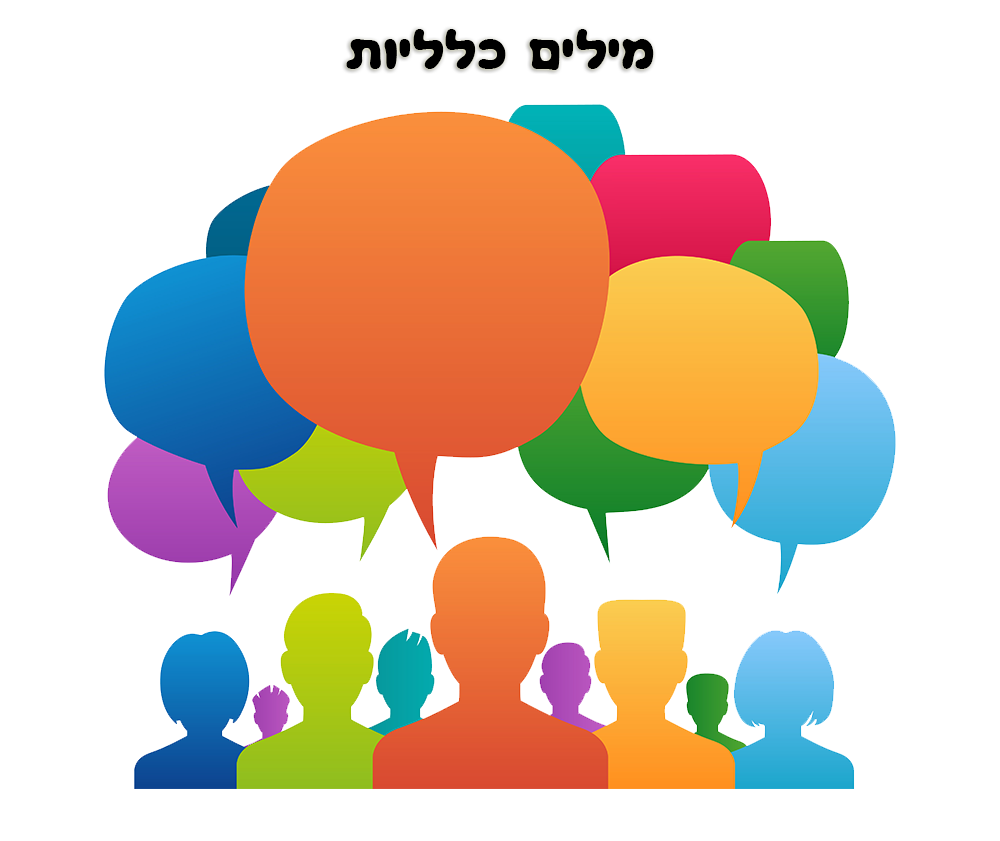
<style>
.page{position:relative;width:1000px;height:841px;background:#ffffff}
.page>*{position:absolute;margin:0}
.t1{font:48px "GanCLM-Bold";color:#000000}
</style>
<div class="page">
<p class="t1" style="left:346px;top:29px;width:308px;height:41px">תויללכ םילימ</p>
</div>
